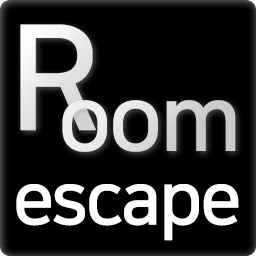
<style>
.page{position:relative;width:256px;height:256px;background:#000000}
.page>*{position:absolute;margin:0}
.t1{font:145px "NanumSquareB";color:#e9e9e9;font-weight:bold}
.t2{font:90px "NanumSquareB";letter-spacing:-0.05em;color:#dbdbdb;font-weight:bold}
.t3{font:72px "NanumSquareB";letter-spacing:-0.05em;color:#ffffff;font-weight:bold}
</style>
<div class="page">
<p class="t1" style="left:20px;top:24px;width:76px;height:107px">R</p>
<p class="t2" style="left:62px;top:100px;width:174px;height:52px">oom</p>
<p class="t3" style="left:16px;top:184px;width:223px;height:57px">escape</p>
</div>
